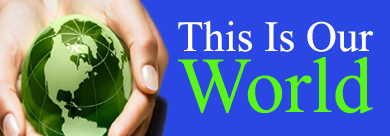
<style>
.page{position:relative;width:390px;height:136px;background:#2a47e3}
.page>*{position:absolute;margin:0}
.t1{font:43px "TimesNewRomanPSMT";color:#ffffff}
.t2{font:36px "TimesNewRomanPSMT";color:#e8e1d9}
.t3{font:79px "TimesNewRomanPSMT";color:#59f517}
</style>
<div class="page">
<p class="t1" style="left:178px;top:21px;width:196px;height:93px"><span class="t2"><br></span>This Is Our <span class="t3">World</span></p>
</div>
